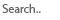
<style>
.page{position:relative;width:60px;height:20px;background:#ffffff}
.page>*{position:absolute;margin:0}
.t1{font:12px "MyriadPro-Regular";color:#696464}
</style>
<div class="page">
<p class="t1" style="left:2px;top:4px;width:39px;height:9px">Search..</p>
</div>
